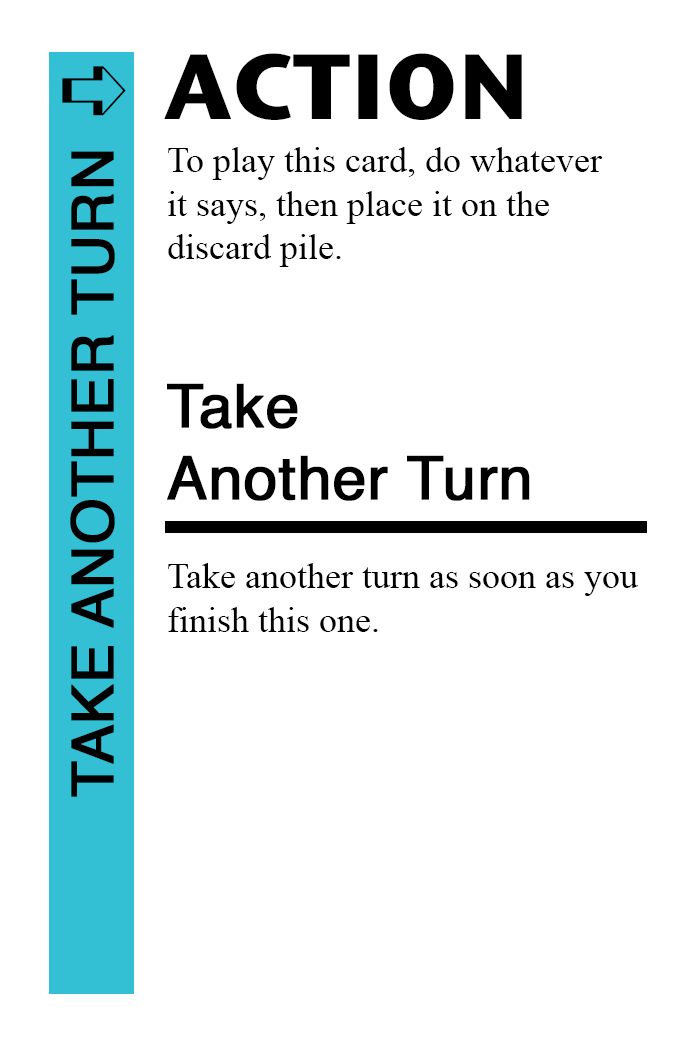
<style>
.page{position:relative;width:700px;height:1042px;background:#ffffff}
.page>*{position:absolute;margin:0}
.t1{font:92px "StoneSansITC-Bold";color:#000000}
.t2{font:82px "MS-Gothic";color:#000000}
.t3{font:36px "TimesNewRomanPSMT";color:#000000}
.t4{font:58px "Helvetica";color:#000000;font-weight:bold}
.t5{font:60px "Helvetica";color:#000000;font-weight:bold}
</style>
<div class="page">
<p class="t1" style="left:164px;top:53px;width:358px;height:67px">ACTION</p>
<p class="t2" style="left:62px;top:66px;width:64px;height:50px">➪</p>
<p class="t3" style="left:168px;top:147px;width:435px;height:120px">To play this card, do whatever<br>it says, then place it on the<br>discard pile.</p>
<p class="t4" style="left:70px;top:151px;width:45px;height:646px;rotate:-90deg">TAKE ANOTHER TURN</p>
<p class="t5" style="left:167px;top:383px;width:363px;height:118px">Take<br>Another Turn</p>
<p class="t3" style="left:168px;top:563px;width:470px;height:69px">Take another turn as soon as you<br>finish this one.</p>
</div>
